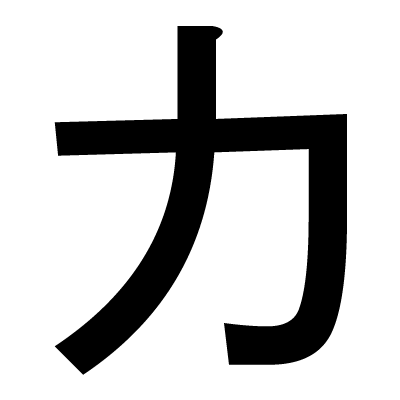
<style>
.page{position:relative;width:400px;height:400px;background:#ffffff}
.page>*{position:absolute;margin:0}
.t1{font:424.8px "MS-PGothic";color:#000000}
</style>
<div class="page">
<p class="t1" style="left:54px;top:26px;width:293px;height:349px">カ</p>
</div>
